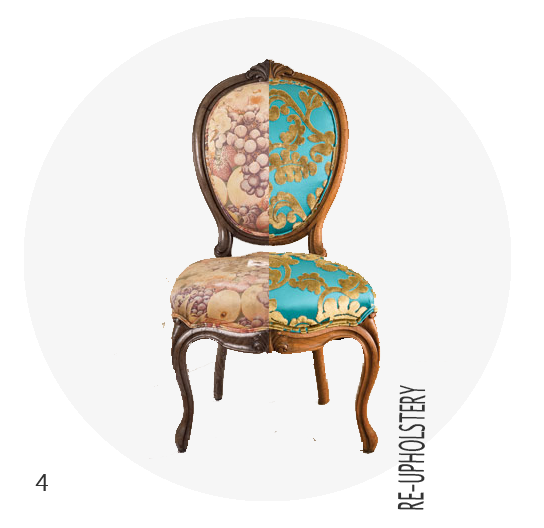
<style>
.page{position:relative;width:544px;height:528px;background:#f6f6f6}
.page>*{position:absolute;margin:0}
.t1{font:35.1px "LucidaSansUnicode";color:#333333;scale:0.45 1}
.t2{font:24px "LucidaSansUnicode";color:#333333}
</style>
<div class="page">
<p class="t1" style="left:397px;top:385px;width:29px;height:125px;rotate:-89deg">RE-UPHOLSTERY</p>
<p class="t2" style="left:35px;top:474px;width:13px;height:17px">4</p>
</div>
